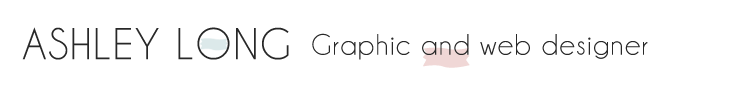
<style>
.page{position:relative;width:747px;height:90px;background:#ffffff}
.page>*{position:absolute;margin:0}
.t1{font:40px "CaviarDreams";letter-spacing:0.025em;color:#282828}
.t2{font:30px "Champagne&Limousines";letter-spacing:0.05em;color:#282828}
</style>
<div class="page">
<p class="t1" style="left:22px;top:27px;width:267px;height:33px">ASHLEY LONG</p>
<p class="t2" style="left:312px;top:33px;width:336px;height:27px">Graphic and web designer</p>
</div>
